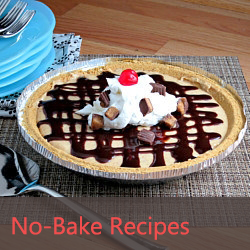
<style>
.page{position:relative;width:250px;height:250px}
.page>*{position:absolute;margin:0}
.t1{font:24px "MicrosoftTaiLe";color:#f14e4e}
</style>
<div class="page">
<p class="t1" style="left:12px;top:216px;width:177px;height:24px">No-Bake Recipes</p>
</div>
